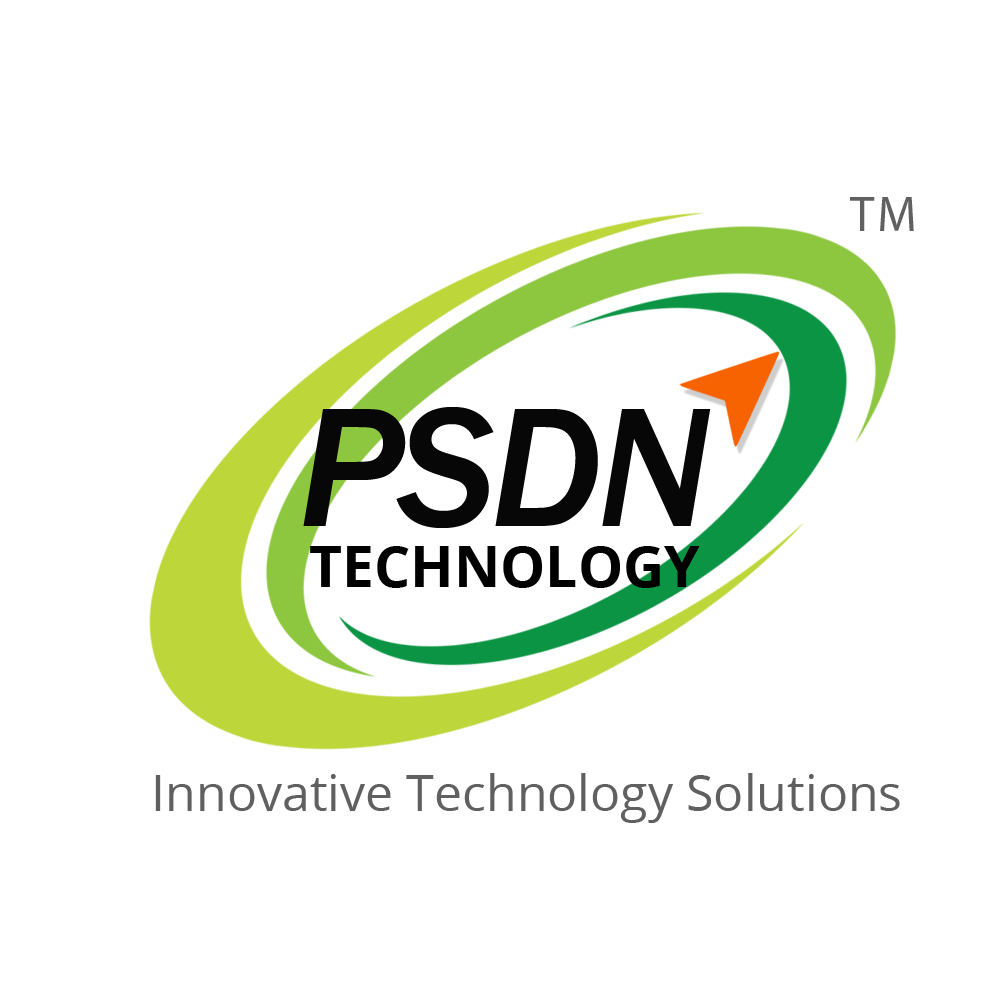
<style>
.page{position:relative;width:1000px;height:1000px;background:#ffffff}
.page>*{position:absolute;margin:0}
.t1{font:49.2px "MyriadPro-Regular";letter-spacing:0.05em;color:#606060}
.t2{font:174.7px "FranklinGothic-MediumItalic";letter-spacing:-0.025em;color:#070707}
.t3{font:57.1px "OpenSans-Bold";color:#000000}
.t4{font:49.5px "OpenSans";letter-spacing:0.005em;color:#606060}
</style>
<div class="page">
<p class="t1" style="left:850px;top:197px;width:64px;height:34px">TM</p>
<p class="t2" style="left:303px;top:407px;width:408px;height:121px">PSDN</p>
<p class="t3" style="left:310px;top:546px;width:390px;height:42px">TECHNOLOGY</p>
<p class="t4" style="left:155px;top:773px;width:745px;height:50px">Innovative Technology Solutions</p>
</div>
